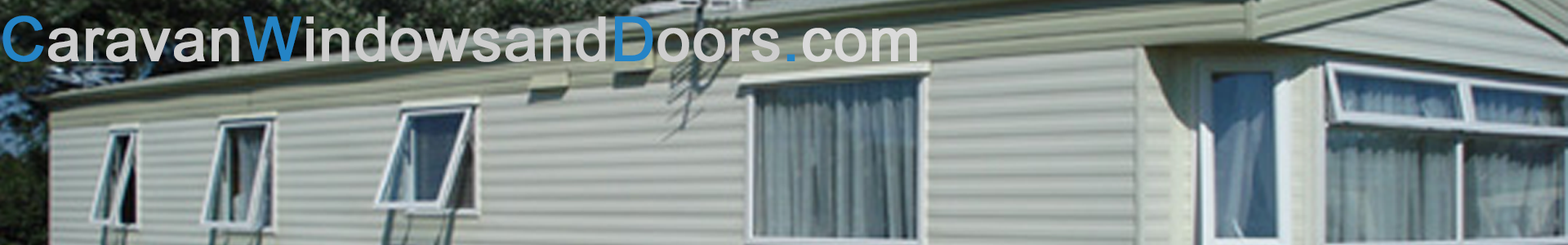
<style>
.page{position:relative;width:1568px;height:245px}
.page>*{position:absolute;margin:0}
.t1{font:61.2px "ArialMT";color:#cdcdcd;font-weight:bold}
.t2{font:61.2px "ArialMT";color:#2484c6;font-weight:bold}
.t3{font:61.2px "ArialMT";color:#dadada;font-weight:bold}
</style>
<div class="page">
<p class="t1" style="left:2px;top:16px;width:915px;height:46px"><span class="t2">C</span>aravan<span class="t2">W</span>indowsand<span class="t2">D</span>oors<span class="t2">.</span><span class="t3">com</span></p>
</div>
